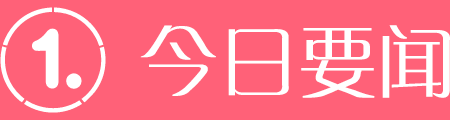
<style>
.page{position:relative;width:450px;height:120px;background:#ff6178}
.page>*{position:absolute;margin:0}
.t1{font:77.2px "FZZQJW--GB1-0";color:#ffffff;font-weight:bold}
</style>
<div class="page">
<p class="t1" style="left:140px;top:25px;width:310px;height:73px">今日要闻</p>
</div>
